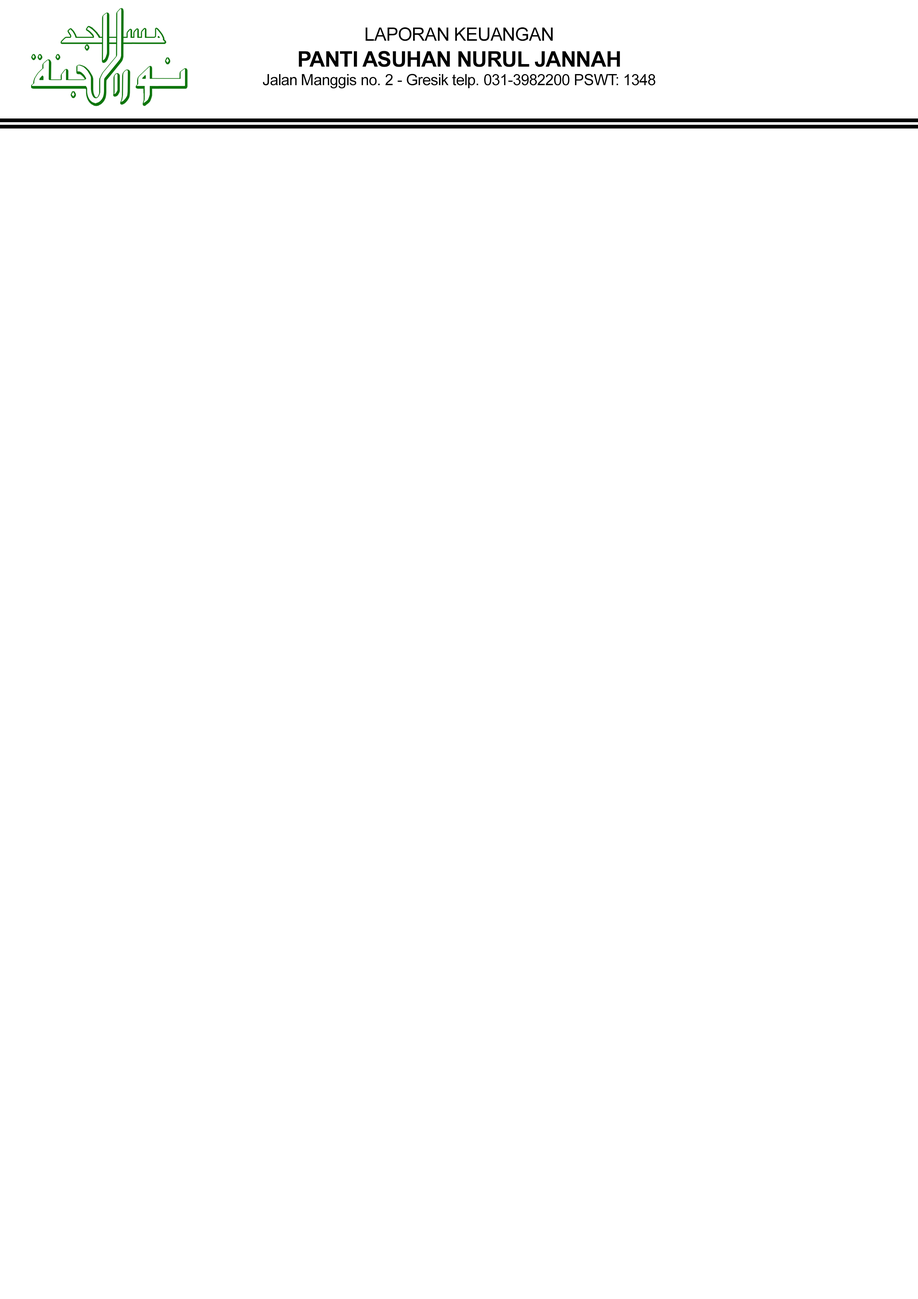
<style>
.page{position:relative;width:918px;height:1299px;background:#ffffff}
.page>*{position:absolute;margin:0}
.t1{font:15.4px "ArialMT";letter-spacing:-0.025em;color:#000000}
.t2{font:18.5px "ArialMT";letter-spacing:-0.025em;color:#000000}
.t3{font:21.6px "Arial-BoldMT";letter-spacing:-0.025em;color:#000000}
</style>
<div class="page">
<p class="t1" style="left:263px;top:27px;width:393px;height:61px;text-align:center"><span class="t2">LAPORAN KEUANGAN<br></span><span class="t3">PANTI ASUHAN NURUL JANNAH<br></span>Jalan Manggis no. 2 - Gresik telp. 031-3982200 PSWT: 1348</p>
</div>
